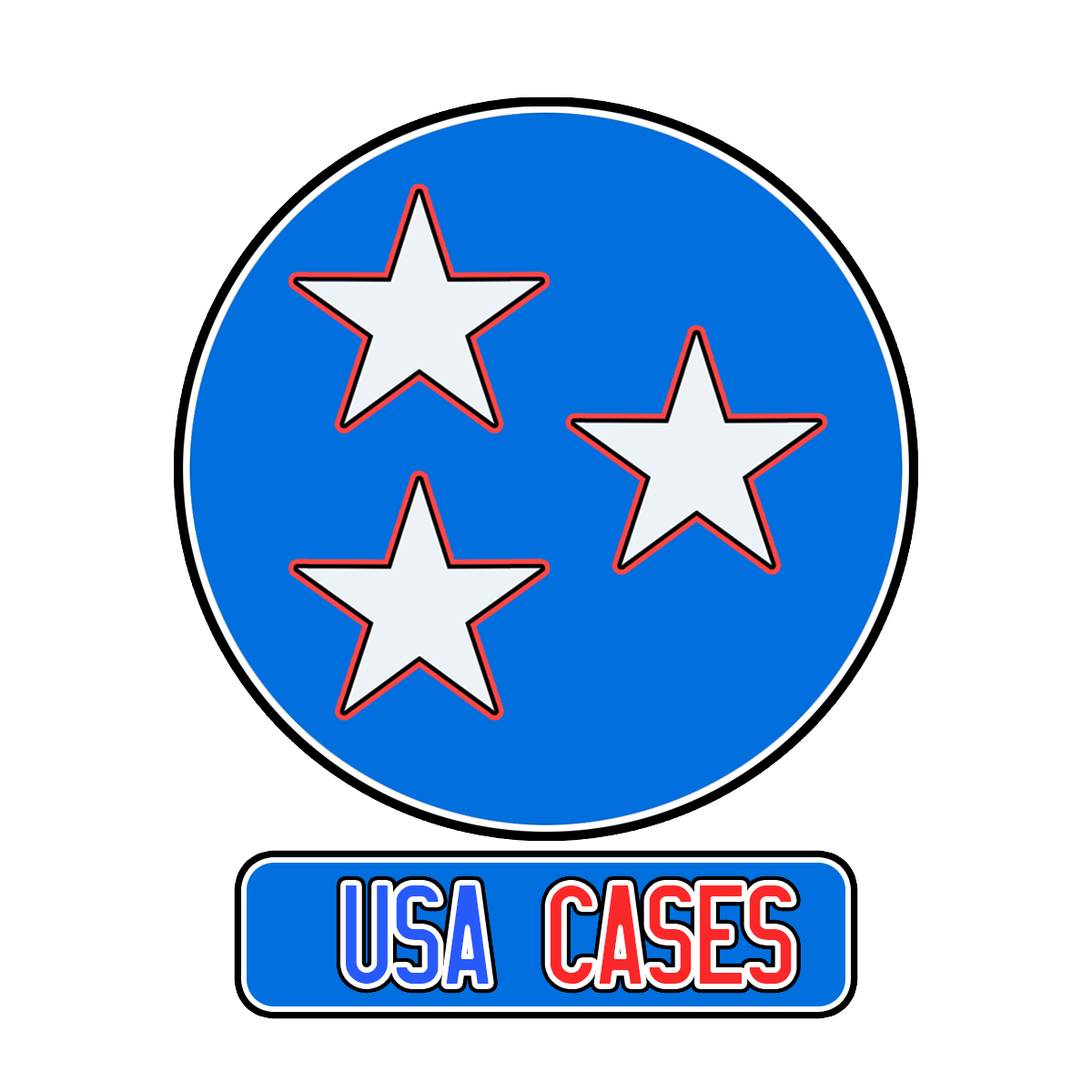
<style>
.page{position:relative;width:1092px;height:1092px;background:#ffffff}
.page>*{position:absolute;margin:0}
.t1{font:98.2px "LICENSEPLATEUSA";color:#285afa}
.t2{font:98.2px "LICENSEPLATEUSA";color:#fa2828}
</style>
<div class="page">
<p class="t1" style="left:346px;top:885px;width:143px;height:99px">USA</p>
<p class="t2" style="left:550px;top:885px;width:242px;height:99px">CASES</p>
</div>
